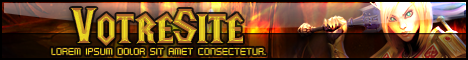
<style>
.page{position:relative;width:468px;height:60px}
.page>*{position:absolute;margin:0}
.t1{font:50px "LifeCraft"}
.t2{font:10px "KarnivoreLite"}
</style>
<div class="page">
<p class="t1" style="left:70px;top:8px;width:173px;height:38px">VotreSite</p>
<p class="t2" style="left:51px;top:47px;width:215px;height:9px">Lorem ipsum dolor sit amet consectetur.</p>
</div>
